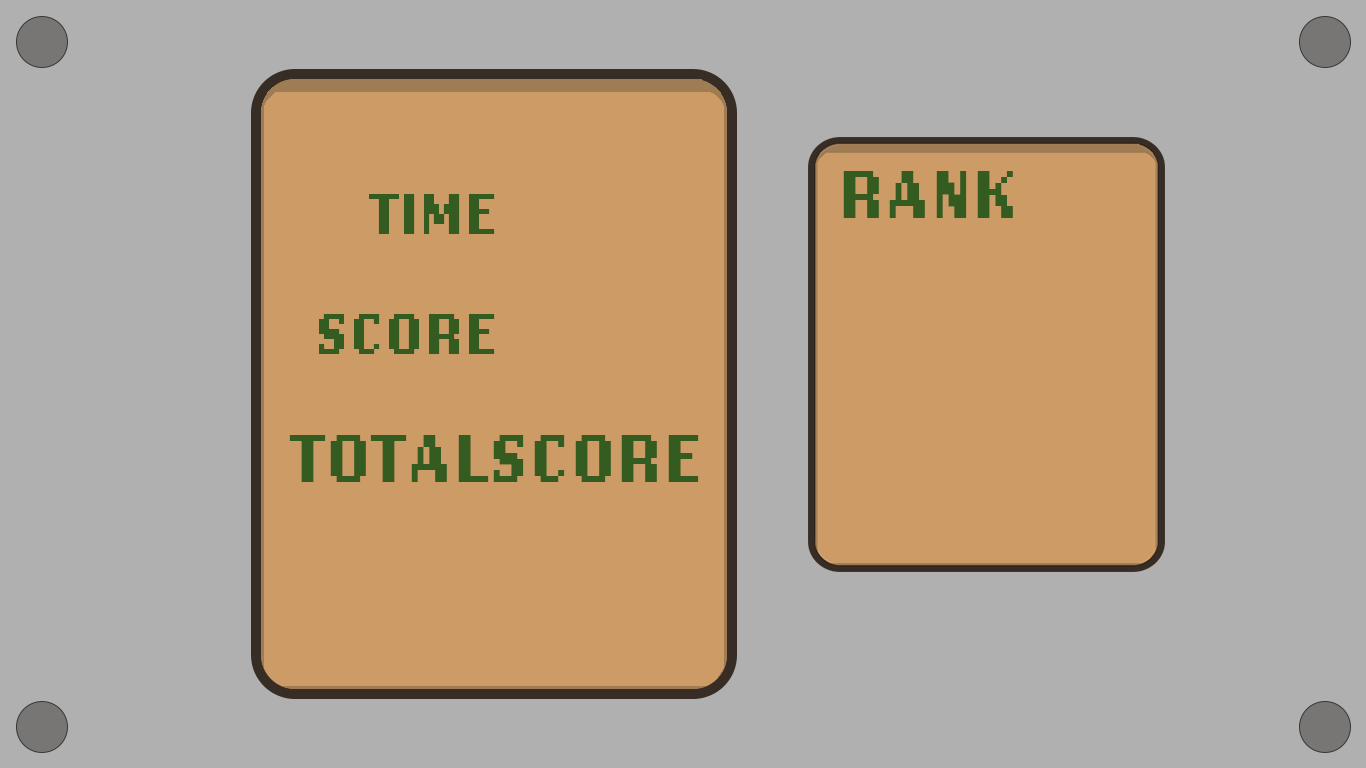
<style>
.page{position:relative;width:1366px;height:768px;background:#b0b0b0}
.page>*{position:absolute;margin:0}
.t1{font:70px "LoRes12OT-Bold";color:#355c20}
.t2{font:60px "LoRes12OT-Bold";color:#355c20}
</style>
<div class="page">
<p class="t1" style="left:843px;top:171px;width:170px;height:47px">RANK</p>
<p class="t2" style="left:369px;top:194px;width:126px;height:40px">TIME</p>
<p class="t2" style="left:319px;top:314px;width:176px;height:40px">SCORE</p>
<p class="t1" style="left:289px;top:435px;width:410px;height:47px">TOTALSCORE</p>
</div>
